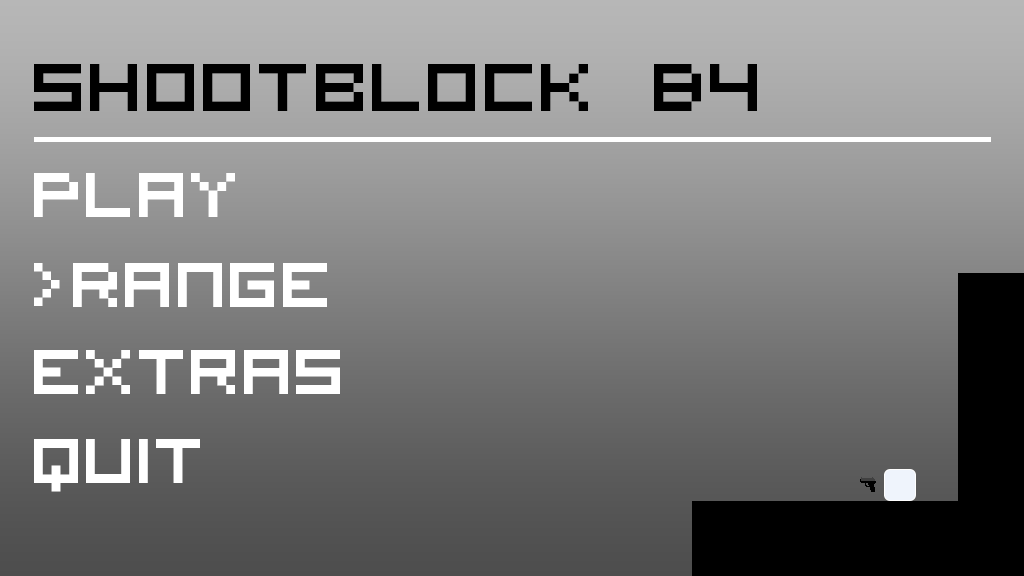
<style>
.page{position:relative;width:1024px;height:576px}
.page>*{position:absolute;margin:0}
.t1{font:93.7px "VisitorTT1BRK";color:#000000}
.t2{font:87.4px "VisitorTT1BRK";color:#ffffff}
.t3{font:85.3px "VisitorTT1BRK";color:#ffffff}
</style>
<div class="page">
<p class="t1" style="left:34px;top:64px;width:723px;height:47px">Shootblock B4</p>
<p class="t2" style="left:34px;top:173px;width:201px;height:44px">Play</p>
<p class="t3" style="left:34px;top:263px;width:26px;height:43px">&gt;</p>
<p class="t2" style="left:73px;top:263px;width:254px;height:44px">Range</p>
<p class="t2" style="left:34px;top:350px;width:306px;height:44px">Extras</p>
<p class="t2" style="left:34px;top:439px;width:166px;height:53px">Quit</p>
</div>
